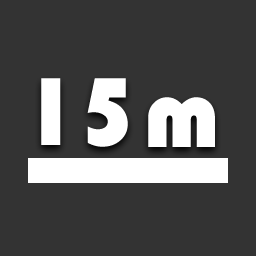
<style>
.page{position:relative;width:256px;height:256px;background:#333333}
.page>*{position:absolute;margin:0}
.t1{font:100px "Bauhaus93";color:#ffffff}
</style>
<div class="page">
<p class="t1" style="left:41px;top:78px;width:87px;height:69px">15</p>
<p class="t1" style="left:148px;top:97px;width:67px;height:50px">m</p>
</div>
